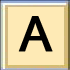
<style>
.page{position:relative;width:70px;height:70px;background:#feeab5}
.page>*{position:absolute;margin:0}
.t1{font:48px "ArialMT";color:#000000;font-weight:bold}
</style>
<div class="page">
<p class="t1" style="left:18px;top:16px;width:35px;height:36px">A</p>
</div>
